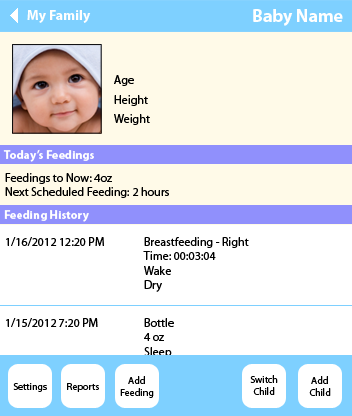
<style>
.page{position:relative;width:352px;height:416px;background:#ffffff}
.page>*{position:absolute;margin:0}
.t1{font:14px "MyriadPro-Bold";color:#ffffff}
.t2{font:18px "MyriadPro-Bold";color:#ffffff}
.t3{font:12px "MyriadPro-Regular";color:#000000}
.t4{font:12px "MyriadPro-Bold";color:#ffffff}
.t5{font:12px "MyriadPro-Regular"}
.t6{font:10px "MyriadPro-Regular";color:#000000}
</style>
<div class="page">
<p class="t1" style="left:27px;top:10px;width:64px;height:13px">My Family</p>
<p class="t2" style="left:253px;top:9px;width:90px;height:17px">Baby Name</p>
<p class="t3" style="left:114px;top:75px;width:20px;height:11px">Age</p>
<p class="t3" style="left:114px;top:95px;width:34px;height:11px">Height</p>
<p class="t3" style="left:114px;top:114px;width:36px;height:11px">Weight</p>
<p class="t4" style="left:3px;top:149px;width:91px;height:13px">Today’s Feedings</p>
<p class="t3" style="left:5px;top:173px;width:164px;height:25px">Feedings to Now: 4oz<br>Next Scheduled Feeding: 2 hours</p>
<p class="t4" style="left:4px;top:210px;width:85px;height:12px">Feeding History</p>
<p class="t3" style="left:6px;top:237px;width:98px;height:9px">1/16/2012 12:20 PM</p>
<p class="t3" style="left:143px;top:237px;width:106px;height:55px">Breastfeeding - Right<br>Time: 00:03:04<br>Wake<br>Dry</p>
<p class="t3" style="left:6px;top:318px;width:92px;height:9px">1/15/2012 7:20 PM</p>
<p class="t5" style="left:144px;top:318px;width:55px;height:54px">Bottle <br>4 oz<br>Sleep<br>Wet / Poop</p>
<p class="t6" style="left:120px;top:376px;width:34px;height:22px;text-align:center">Add<br>Feeding</p>
<p class="t6" style="left:250px;top:375px;width:28px;height:20px;text-align:center">Switch<br>Child</p>
<p class="t6" style="left:309px;top:376px;width:22px;height:20px;text-align:center">Add<br>Child</p>
<p class="t6" style="left:13px;top:383px;width:34px;height:9px">Settings</p>
<p class="t6" style="left:67px;top:383px;width:32px;height:9px">Reports</p>
</div>
